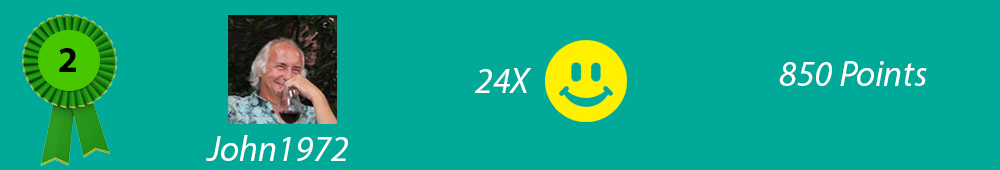
<style>
.page{position:relative;width:1000px;height:170px;background:#00a998}
.page>*{position:absolute;margin:0}
.t1{font:36px "MyriadPro-Bold";color:#000000}
.t2{font:36px "MyriadPro-It";color:#ffffff}
</style>
<div class="page">
<p class="t1" style="left:59px;top:48px;width:17px;height:24px">2</p>
<p class="t2" style="left:779px;top:61px;width:148px;height:25px">850 Points</p>
<p class="t2" style="left:475px;top:68px;width:57px;height:25px">24X</p>
<p class="t2" style="left:206px;top:135px;width:142px;height:26px">John1972</p>
</div>
